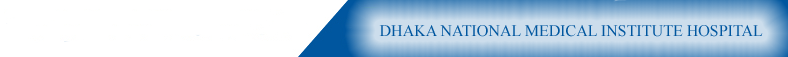
<style>
.page{position:relative;width:788px;height:57px;background:#ffffff}
.page>*{position:absolute;margin:0}
.t1{font:16px "TimesNewRomanPSMT";color:#00569f}
</style>
<div class="page">
<p class="t1" style="left:379px;top:25px;width:384px;height:12px">DHAKA NATIONAL MEDICAL INSTITUTE HOSPITAL</p>
</div>
